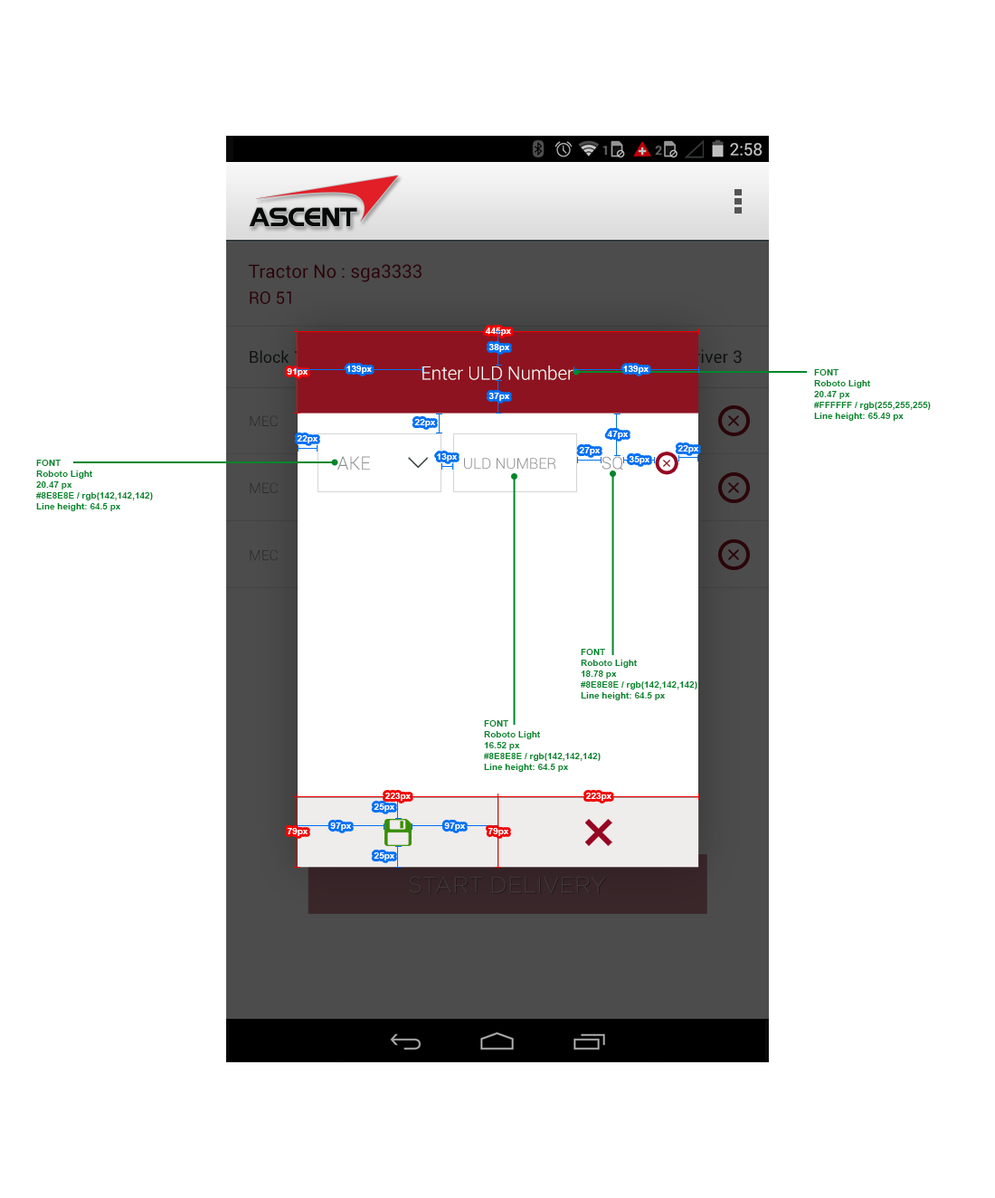
<style>
.page{position:relative;width:995px;height:1198px;background:#ffffff}
.page>*{position:absolute;margin:0}
.t1{font:18.5px "Roboto-Regular";color:#2d020a}
.t2{font:17.2px "Roboto-Regular";color:#2d020a}
.t3{font:9px "Arial-BoldMT";color:#ffffff}
.t4{font:17.2px "Roboto-Regular"}
.t5{font:18.5px "Roboto-Light";color:#ffffff}
.t6{font:9px "Arial-BoldMT";color:#00872b}
.t7{font:14.3px "Roboto-Light";color:#292929}
.t8{font:18.5px "Roboto-Light";color:#8e8e8e}
.t9{font:15px "Roboto-Light";color:#8e8e8e}
.t10{font:17px "Roboto-Light";color:#8e8e8e}
.t11{font:14.3px "Roboto-Light";color:#2a2a2a}
.t12{font:22.7px "Gotham-Light";color:#3f3739}
</style>
<div class="page">
<p class="t1" style="left:249px;top:264px;width:173px;height:18px">Tractor No : sga3333</p>
<p class="t2" style="left:250px;top:291px;width:41px;height:13px">RO 51</p>
<p class="t3" style="left:485px;top:328px;width:26px;height:8px">445px</p>
<p class="t3" style="left:489px;top:344px;width:20px;height:8px">38px</p>
<p class="t4" style="left:684px;top:349px;width:58px;height:15px">Driver 3</p>
<p class="t3" style="left:347px;top:366px;width:25px;height:8px">139px</p>
<p class="t5" style="left:423px;top:366px;width:151px;height:14px">Enter ULD Number</p>
<p class="t3" style="left:623px;top:366px;width:26px;height:8px">139px</p>
<p class="t3" style="left:287px;top:368px;width:21px;height:8px">91px</p>
<p class="t6" style="left:814px;top:369px;width:117px;height:52px">FONT <br>Roboto Light<br>20.47 px<br>#FFFFFF / rgb(255,255,255)<br>Line height: 65.49 px</p>
<p class="t3" style="left:489px;top:393px;width:20px;height:8px">37px</p>
<p class="t7" style="left:250px;top:415px;width:28px;height:11px">MEC</p>
<p class="t3" style="left:414px;top:419px;width:21px;height:8px">22px</p>
<p class="t3" style="left:297px;top:435px;width:21px;height:8px">22px</p>
<p class="t3" style="left:607px;top:431px;width:21px;height:8px">47px</p>
<p class="t3" style="left:579px;top:447px;width:21px;height:8px">27px</p>
<p class="t3" style="left:678px;top:445px;width:21px;height:8px">22px</p>
<p class="t6" style="left:36px;top:460px;width:117px;height:51px">FONT <br>Roboto Light<br>20.47 px<br>#8E8E8E / rgb(142,142,142)<br>Line height: 64.5 px</p>
<p class="t8" style="left:338px;top:456px;width:32px;height:14px">AKE</p>
<p class="t3" style="left:437px;top:453px;width:20px;height:8px">13px</p>
<p class="t9" style="left:464px;top:458px;width:92px;height:11px">ULD NUMBER</p>
<p class="t10" style="left:602px;top:456px;width:21px;height:15px">SQ</p>
<p class="t3" style="left:629px;top:456px;width:21px;height:8px">35px</p>
<p class="t7" style="left:250px;top:482px;width:28px;height:11px">MEC</p>
<p class="t11" style="left:250px;top:549px;width:28px;height:12px">MEC</p>
<p class="t6" style="left:581px;top:649px;width:117px;height:51px">FONT <br>Roboto Light<br>18.78 px<br>#8E8E8E / rgb(142,142,142)<br>Line height: 64.5 px</p>
<p class="t6" style="left:484px;top:720px;width:117px;height:52px">FONT <br>Roboto Light<br>16.52 px<br>#8E8E8E / rgb(142,142,142)<br>Line height: 64.5 px</p>
<p class="t3" style="left:385px;top:793px;width:26px;height:8px">223px</p>
<p class="t3" style="left:586px;top:793px;width:26px;height:8px">223px</p>
<p class="t3" style="left:374px;top:804px;width:21px;height:8px">25px</p>
<p class="t3" style="left:287px;top:828px;width:21px;height:8px">79px</p>
<p class="t3" style="left:330px;top:823px;width:21px;height:8px">97px</p>
<p class="t3" style="left:444px;top:823px;width:21px;height:8px">97px</p>
<p class="t3" style="left:488px;top:828px;width:21px;height:8px">79px</p>
<p class="t3" style="left:374px;top:852px;width:21px;height:9px">25px</p>
<p class="t12" style="left:409px;top:876px;width:197px;height:17px">START DELIVERY</p>
</div>
